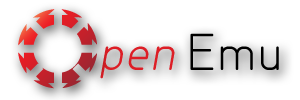
<style>
.page{position:relative;width:300px;height:100px;background:#ffffff}
.page>*{position:absolute;margin:0}
.t1{font:48px "GreyscaleBasic";letter-spacing:0.075em;color:#dd1e26;font-style:italic}
.t2{font:48px "GreyscaleBasic";letter-spacing:0.075em;color:#000000}
</style>
<div class="page">
<p class="t1" style="left:100px;top:33px;width:179px;height:46px">pen<span class="t2">Emu</span></p>
</div>
